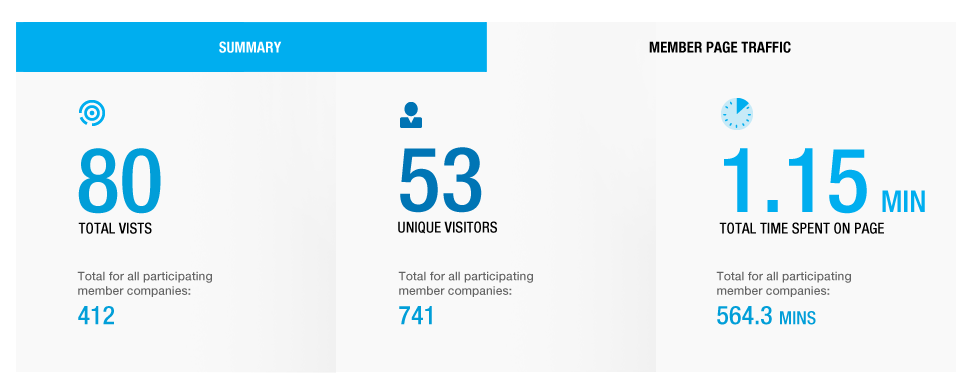
<style>
.page{position:relative;width:972px;height:385px;background:#f9f9f9}
.page>*{position:absolute;margin:0}
.t1{font:15px "HelveticaNeue-CondensedBold";color:#ffffff;text-transform:uppercase}
.t2{font:15px "HelveticaNeue-CondensedBold";color:#000000;text-transform:uppercase}
.t3{font:90px "HelveticaNeue-MediumCond";color:#019ed8;text-transform:uppercase}
.t4{font:90px "HelveticaNeue-MediumCond";color:#0075b5;text-transform:uppercase}
.t5{font:90px "HelveticaNeue-MediumCond";color:#00aeef;text-transform:uppercase}
.t6{font:30px "HelveticaNeue-MediumCond";color:#00aeef;text-transform:uppercase}
.t7{font:15px "HelveticaNeue-MediumCond";color:#000000;text-transform:uppercase}
.t8{font:12px "HelveticaNeue-Medium";color:#646464}
.t9{font:26px "HelveticaNeue-MediumCond";color:#019ed8}
.t10{font:26px "HelveticaNeue-MediumCond";color:#019ed8;font-variant:small-caps}
</style>
<div class="page">
<p class="t1" style="left:219px;top:41px;width:63px;height:12px">Summary</p>
<p class="t2" style="left:649px;top:41px;width:142px;height:12px">Member page traffic</p>
<p class="t3" style="left:78px;top:148px;width:83px;height:66px">80</p>
<p class="t4" style="left:400px;top:147px;width:82px;height:66px">53</p>
<p class="t5" style="left:724px;top:148px;width:201px;height:66px">1.15 <span class="t6">Min</span></p>
<p class="t7" style="left:78px;top:222px;width:74px;height:12px">Total vists</p>
<p class="t7" style="left:398px;top:221px;width:99px;height:13px">UNique visitors</p>
<p class="t7" style="left:719px;top:222px;width:165px;height:12px">Total TIME SPENT ON PAGE</p>
<p class="t8" style="left:77px;top:271px;width:135px;height:26px">Total for all participating member companies:</p>
<p class="t8" style="left:398px;top:271px;width:135px;height:26px">Total for all participating member companies:</p>
<p class="t8" style="left:716px;top:271px;width:135px;height:26px">Total for all participating member companies:</p>
<p class="t9" style="left:78px;top:306px;width:36px;height:19px">412</p>
<p class="t9" style="left:399px;top:306px;width:33px;height:19px">741</p>
<p class="t9" style="left:717px;top:306px;width:99px;height:19px">564.3 <span class="t10">mins</span></p>
</div>
